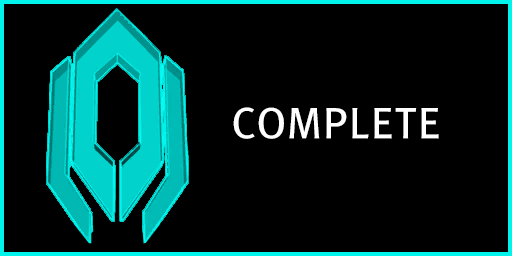
<style>
.page{position:relative;width:512px;height:256px;background:#000000}
.page>*{position:absolute;margin:0}
.t1{font:39.7px "RixMGoB";letter-spacing:0.04em;color:#ffffff}
</style>
<div class="page">
<p class="t1" style="left:233px;top:107px;width:206px;height:32px">COMPLETE</p>
</div>
